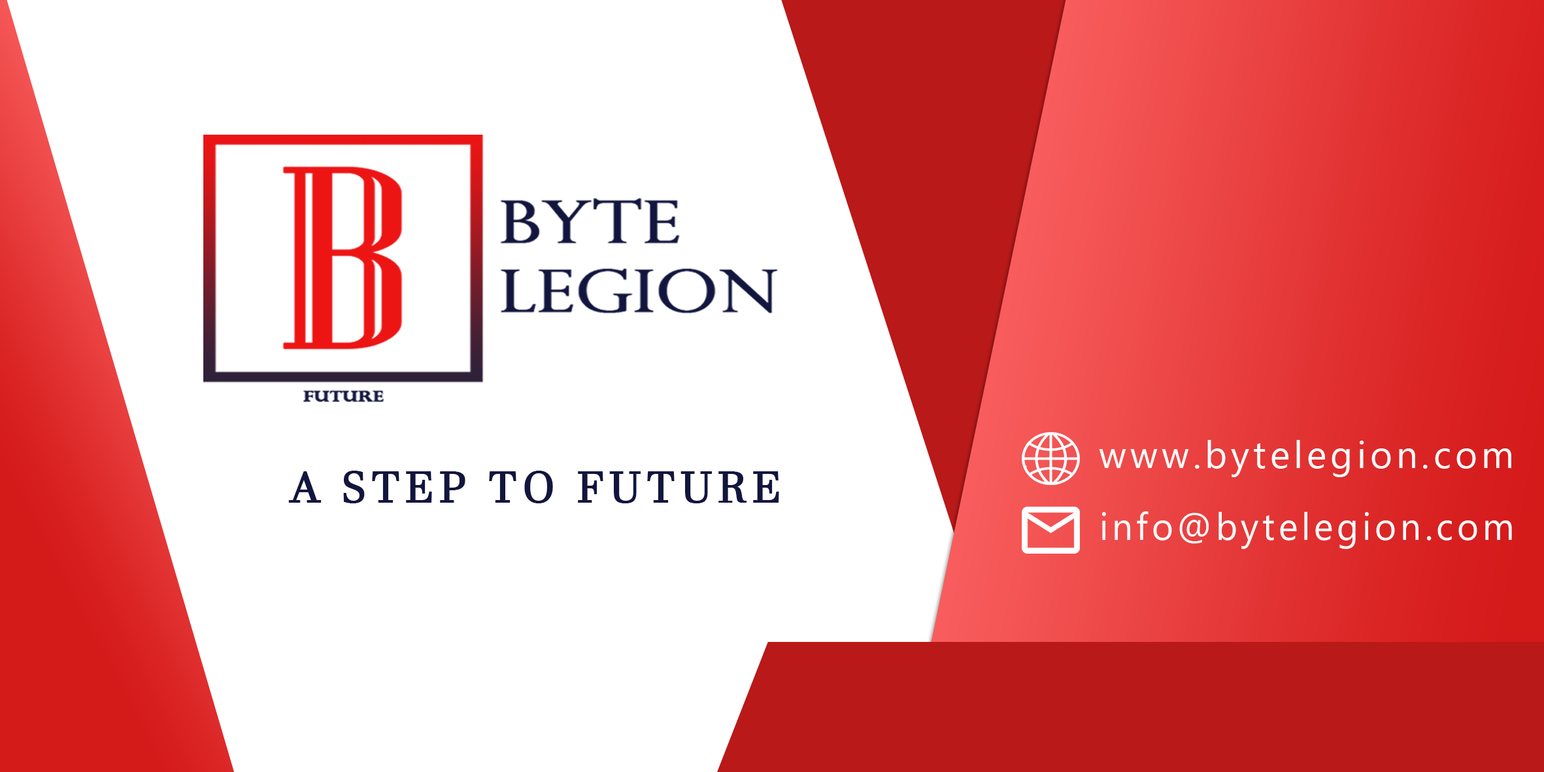
<style>
.page{position:relative;width:1544px;height:772px;background:#ffffff}
.page>*{position:absolute;margin:0}
.t1{font:38.1px "Ebrima";letter-spacing:0.1em;color:#ffffff}
.t2{font:43.1px "JavaneseText";letter-spacing:0.1em;color:#12153e;font-weight:bold}
.t3{font:38.1px "Ebrima";letter-spacing:0.1em;color:#ffffff;scale:0.97 1}
</style>
<div class="page">
<p class="t1" style="left:1099px;top:440px;width:413px;height:37px">www.bytelegion.com</p>
<p class="t2" style="left:288px;top:471px;width:491px;height:32px">A STEP TO FUTURE</p>
<p class="t3" style="left:1102px;top:511px;width:410px;height:38px">info@bytelegion.com</p>
</div>
